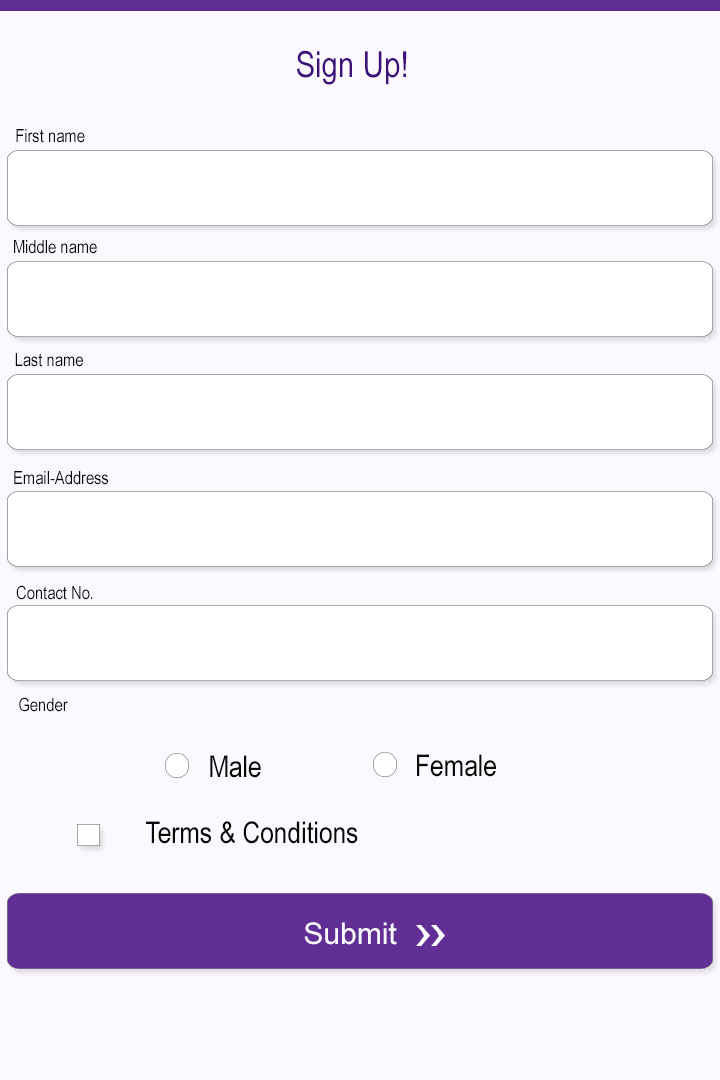
<style>
.page{position:relative;width:720px;height:1080px;background:#fbf8fe}
.page>*{position:absolute;margin:0}
.t1{font:36px "ArialNarrow";color:#3d107b}
.t2{font:18px "ArialNarrow";color:#090909}
.t3{font:30px "ArialNarrow";color:#090909}
.t4{font:30px "ArialMT";color:#f9f7fb}
</style>
<div class="page">
<p class="t1" style="left:297px;top:50px;width:110px;height:35px">Sign Up!</p>
<p class="t2" style="left:16px;top:129px;width:69px;height:14px">First name</p>
<p class="t2" style="left:14px;top:240px;width:83px;height:14px">Middle name</p>
<p class="t2" style="left:15px;top:353px;width:68px;height:14px">Last name</p>
<p class="t2" style="left:14px;top:471px;width:94px;height:14px">Email-Address</p>
<p class="t2" style="left:16px;top:585px;width:77px;height:15px">Contact No.</p>
<p class="t2" style="left:19px;top:697px;width:49px;height:15px">Gender</p>
<p class="t3" style="left:210px;top:755px;width:51px;height:23px">Male</p>
<p class="t3" style="left:417px;top:754px;width:79px;height:23px">Female</p>
<p class="t3" style="left:146px;top:821px;width:212px;height:23px">Terms &amp; Conditions</p>
<p class="t4" style="left:304px;top:922px;width:93px;height:23px">Submit</p>
</div>
